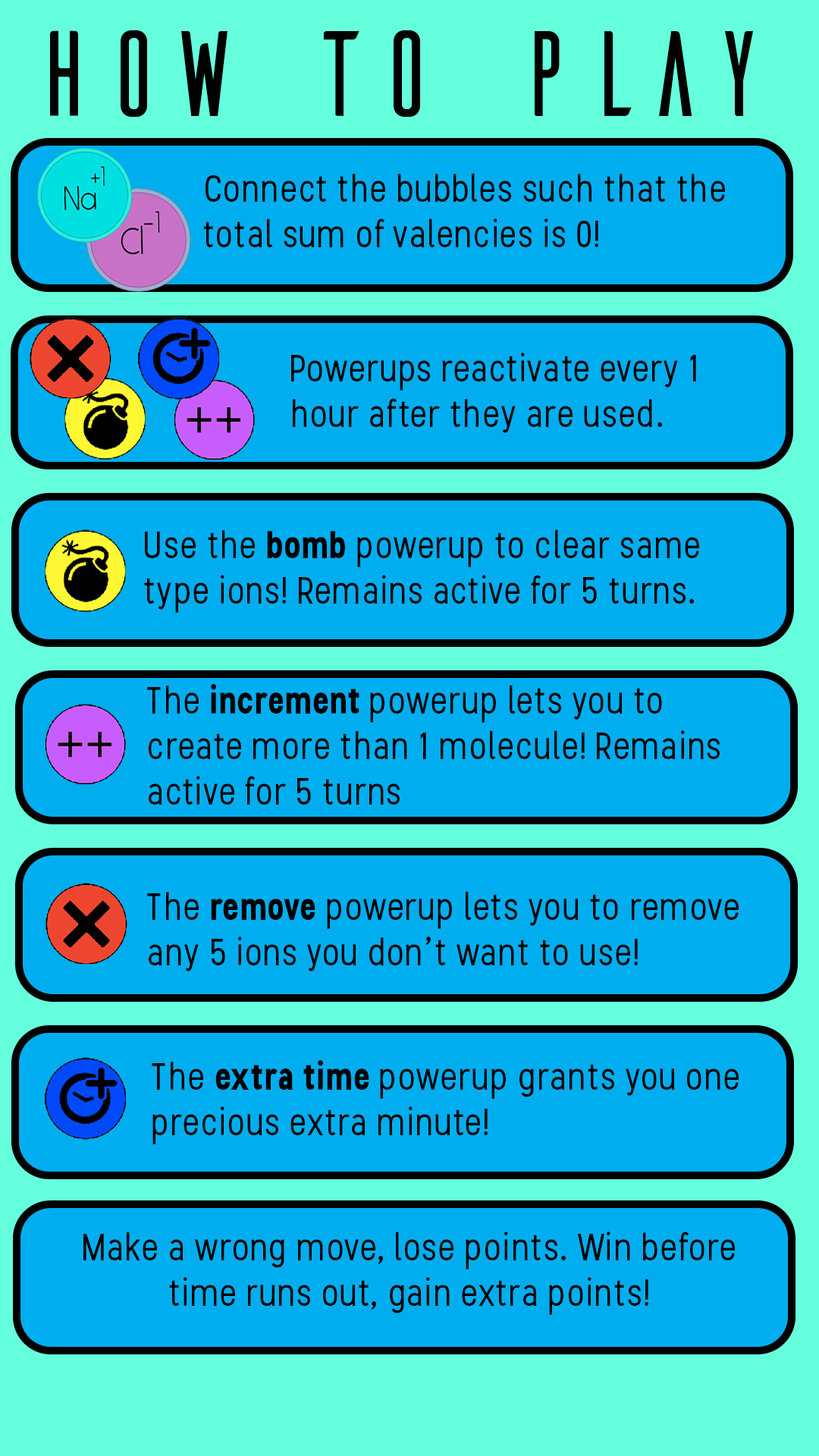
<style>
.page{position:relative;width:819px;height:1456px;background:#00aeef}
.page>*{position:absolute;margin:0}
.t1{font:121.3px "Ailerons-Regular";color:#000000;scale:0.95 1}
.t2{font:37.9px "Stellar-Regular";color:#000000;scale:0.95 1}
.t3{font:37.9px "Stellar-Bold";color:#000000;scale:0.95 1}
</style>
<div class="page">
<p class="t1" style="left:50px;top:30px;width:704px;height:87px">How to play</p>
<p class="t2" style="left:203px;top:173px;width:522px;height:74px">Connect the bubbles such that the total sum of valencies is 0!</p>
<p class="t2" style="left:291px;top:353px;width:405px;height:80px">Powerups reactivate every 1 hour after they are used.</p>
<p class="t2" style="left:144px;top:529px;width:555px;height:84px">Use the <span class="t3">bomb </span>powerup to clear same type ions! Remains active for 5 turns.</p>
<p class="t2" style="left:147px;top:684px;width:573px;height:121px">The <span class="t3">increment </span>powerup lets you to create more than 1 molecule! Remains active for 5 turns</p>
<p class="t2" style="left:147px;top:891px;width:592px;height:80px">The <span class="t3">remove </span>powerup lets you to remove any 5 ions you don’t want to use!</p>
<p class="t2" style="left:152px;top:1060px;width:587px;height:84px">The <span class="t3">extra time</span> powerup grants you one precious extra minute!</p>
<p class="t2" style="left:83px;top:1232px;width:652px;height:83px;text-align:center">Make a wrong move, lose points. Win before time runs out, gain extra points!</p>
</div>
